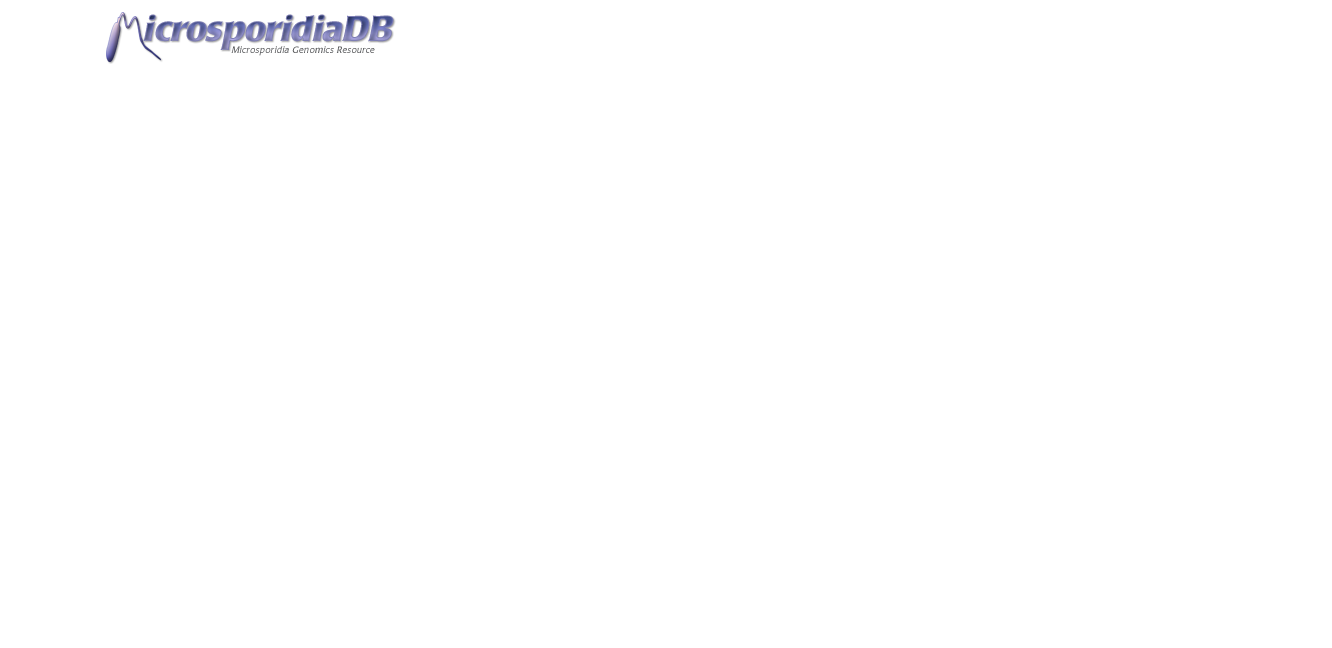
<style>
.page{position:relative;width:1332px;height:648px;background:#ffffff}
.page>*{position:absolute;margin:0}
.t1{font:36px "PopplLaudatio-Bold";letter-spacing:-0.02em}
.t2{font:9.3px "LaudatioC";letter-spacing:0.01em;color:#5d5e60}
</style>
<div class="page">
<p class="t1" style="left:143px;top:14px;width:251px;height:36px">icrosporidiaDB</p>
<p class="t2" style="left:231px;top:46px;width:144px;height:10px">Microsporidia Genomics Resource</p>
</div>
